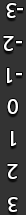
<style>
.page{position:relative;width:26px;height:215px;background:#333333}
.page>*{position:absolute;margin:0}
.t1{font:23.3px "MyriadHebrew-Regular";color:#ffffff}
</style>
<div class="page">
<p class="t1" style="left:6px;top:3px;width:17px;height:15px;rotate:180deg">-3</p>
<p class="t1" style="left:3px;top:36px;width:19px;height:15px;rotate:180deg">-2</p>
<p class="t1" style="left:7px;top:68px;width:15px;height:15px;rotate:180deg">-1</p>
<p class="t1" style="left:7px;top:99px;width:11px;height:15px;rotate:180deg">0</p>
<p class="t1" style="left:11px;top:131px;width:6px;height:15px;rotate:180deg">1</p>
<p class="t1" style="left:7px;top:164px;width:11px;height:15px;rotate:180deg">2</p>
<p class="t1" style="left:8px;top:197px;width:10px;height:15px;rotate:180deg">3</p>
</div>
